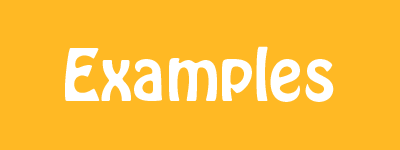
<style>
.page{position:relative;width:400px;height:150px;background:#ffb924}
.page>*{position:absolute;margin:0}
.t1{font:63.7px "HoboStd";color:#ffffff}
</style>
<div class="page">
<p class="t1" style="left:65px;top:46px;width:269px;height:56px">Examples</p>
</div>
